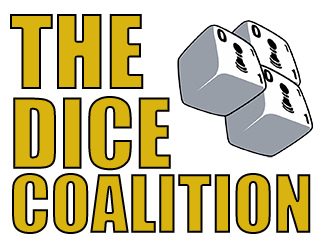
<style>
.page{position:relative;width:333px;height:250px;background:#ffffff}
.page>*{position:absolute;margin:0}
.t1{font:94.7px "Impact";color:#d9b310}
.t2{font:90px "Impact";color:#d9b310}
.t3{font:73.9px "Impact";color:#d9b310}
</style>
<div class="page">
<p class="t1" style="left:10px;top:14px;width:134px;height:75px">THE</p>
<p class="t2" style="left:13px;top:96px;width:158px;height:75px">DICE</p>
<p class="t3" style="left:12px;top:173px;width:299px;height:61px">COALITION</p>
</div>
